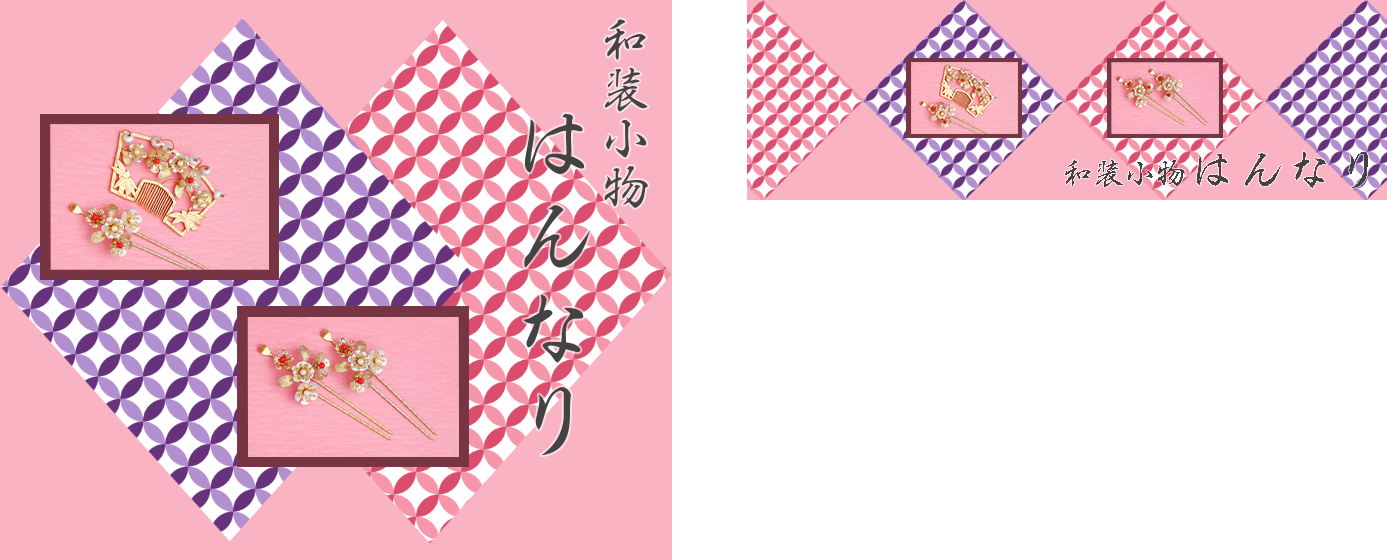
<style>
.page{position:relative;width:1387px;height:560px;background:#ffffff}
.page>*{position:absolute;margin:0}
.t1{font:30px "Gyoshokk-R";letter-spacing:0.025em;color:#434343}
.t2{font:48px "Gyoshokk-R";letter-spacing:0.025em;color:#434343}
</style>
<div class="page">
<p class="t1" style="left:1065px;top:160px;width:120px;height:27px">和装小物</p>
<p class="t2" style="left:1197px;top:152px;width:171px;height:36px">はんなり</p>
</div>
